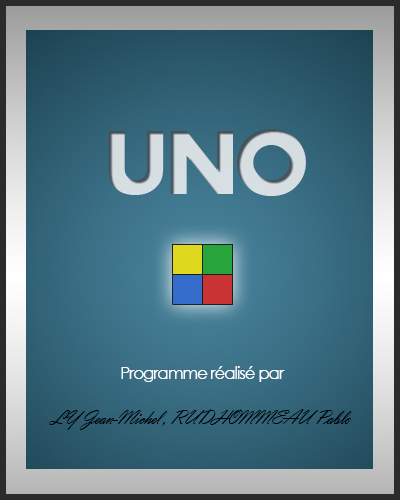
<style>
.page{position:relative;width:400px;height:500px}
.page>*{position:absolute;margin:0}
.t1{font:93.8px "Aharoni-Bold";letter-spacing:-0.06em;color:#d6dee2}
.t2{font:16.7px "CenturyGothic";letter-spacing:-0.06em;color:#ffffff}
.t3{font:20.7px "VladimirScript";letter-spacing:-0.06em;color:#000000}
.t4{font:20.7px "KozGoPro-Medium";letter-spacing:-0.06em;color:#000000}
</style>
<div class="page">
<p class="t1" style="left:108px;top:129px;width:198px;height:67px">UNO</p>
<p class="t2" style="left:121px;top:366px;width:164px;height:16px">Programme réalisé par</p>
<p class="t3" style="left:49px;top:409px;width:303px;height:21px"><span class="t4"> </span>LY Jean-Michel , RUDHOMMEAU Pablo</p>
</div>
